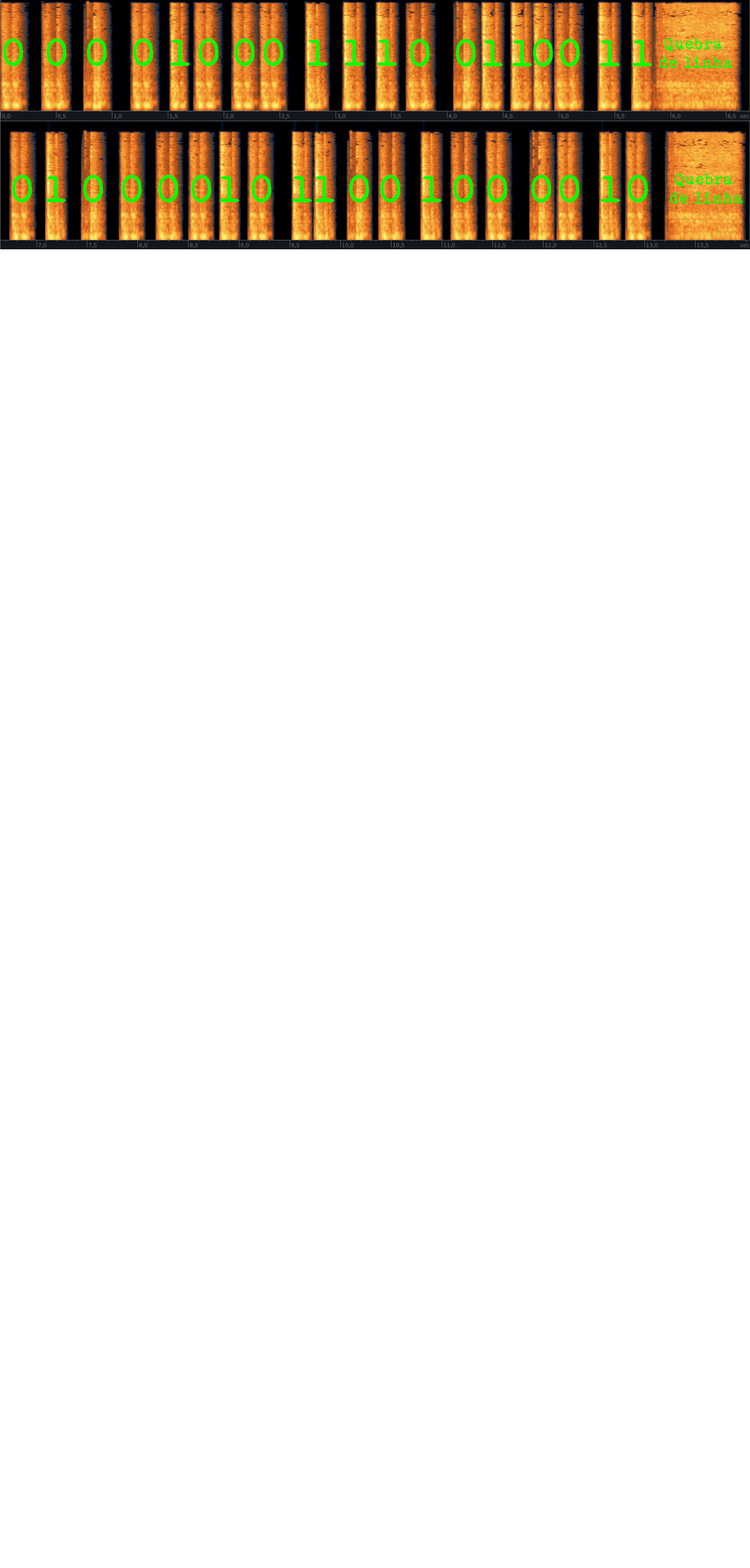
<style>
.page{position:relative;width:750px;height:1568px;background:#ffffff}
.page>*{position:absolute;margin:0}
.t1{font:37.6px "HOLLYWOOD-STARFIRE";color:#00ff00}
.t2{font:15.7px "HOLLYWOOD-STARFIRE";color:#00ff00}
</style>
<div class="page">
<p class="t1" style="left:3px;top:38px;width:20px;height:28px">0</p>
<p class="t1" style="left:47px;top:38px;width:19px;height:28px">0</p>
<p class="t1" style="left:87px;top:38px;width:20px;height:28px">0</p>
<p class="t1" style="left:133px;top:38px;width:20px;height:28px">0</p>
<p class="t1" style="left:170px;top:39px;width:20px;height:27px">1</p>
<p class="t1" style="left:199px;top:38px;width:19px;height:28px">0</p>
<p class="t1" style="left:235px;top:38px;width:20px;height:28px">0</p>
<p class="t1" style="left:263px;top:38px;width:20px;height:28px">0</p>
<p class="t1" style="left:308px;top:39px;width:20px;height:27px">1</p>
<p class="t1" style="left:344px;top:39px;width:20px;height:27px">1</p>
<p class="t1" style="left:377px;top:39px;width:20px;height:27px">1</p>
<p class="t1" style="left:410px;top:39px;width:20px;height:28px">0</p>
<p class="t1" style="left:456px;top:39px;width:20px;height:28px">0</p>
<p class="t1" style="left:483px;top:40px;width:20px;height:27px">1</p>
<p class="t1" style="left:512px;top:40px;width:20px;height:27px">1</p>
<p class="t1" style="left:533px;top:39px;width:20px;height:28px">0</p>
<p class="t1" style="left:560px;top:39px;width:20px;height:28px">0</p>
<p class="t1" style="left:600px;top:40px;width:20px;height:27px">1</p>
<p class="t1" style="left:632px;top:40px;width:20px;height:27px">1</p>
<p class="t2" style="left:660px;top:38px;width:73px;height:30px;text-align:center">Quebra <br>de linha</p>
<p class="t2" style="left:670px;top:174px;width:73px;height:30px;text-align:center">Quebra <br>de linha</p>
<p class="t1" style="left:12px;top:175px;width:20px;height:28px">0</p>
<p class="t1" style="left:46px;top:176px;width:20px;height:27px">1</p>
<p class="t1" style="left:83px;top:175px;width:20px;height:28px">0</p>
<p class="t1" style="left:122px;top:175px;width:20px;height:28px">0</p>
<p class="t1" style="left:158px;top:175px;width:20px;height:28px">0</p>
<p class="t1" style="left:191px;top:175px;width:20px;height:28px">0</p>
<p class="t1" style="left:220px;top:176px;width:19px;height:27px">1</p>
<p class="t1" style="left:251px;top:175px;width:20px;height:28px">0</p>
<p class="t1" style="left:292px;top:176px;width:20px;height:27px">1</p>
<p class="t1" style="left:315px;top:176px;width:20px;height:27px">1</p>
<p class="t1" style="left:349px;top:175px;width:20px;height:28px">0</p>
<p class="t1" style="left:381px;top:175px;width:19px;height:28px">0</p>
<p class="t1" style="left:422px;top:176px;width:20px;height:27px">1</p>
<p class="t1" style="left:453px;top:175px;width:21px;height:28px">0</p>
<p class="t1" style="left:487px;top:175px;width:21px;height:28px">0</p>
<p class="t1" style="left:531px;top:175px;width:20px;height:28px">0</p>
<p class="t1" style="left:559px;top:175px;width:21px;height:28px">0</p>
<p class="t1" style="left:601px;top:176px;width:19px;height:27px">1</p>
<p class="t1" style="left:628px;top:175px;width:20px;height:28px">0</p>
</div>
